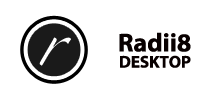
<style>
.page{position:relative;width:215px;height:100px;background:#ffffff}
.page>*{position:absolute;margin:0}
.t1{font:26px "MyriadPro-Bold";color:#080000}
.t2{font:17px "MyriadPro-Bold";color:#080000}
</style>
<div class="page">
<p class="t1" style="left:119px;top:32px;width:72px;height:20px">Radii8R</p>
<p class="t2" style="left:120px;top:55px;width:71px;height:13px">DESKTOP</p>
</div>
